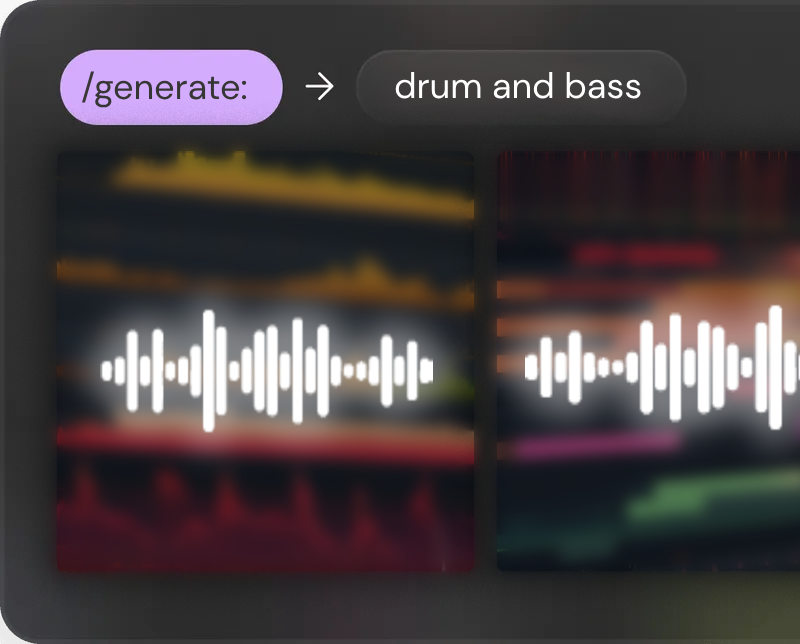
<style>
.page{position:relative;width:800px;height:644px}
.page>*{position:absolute;margin:0}
.t1{font:36px "DMSans-Regular";color:#363634}
.t2{font:36px "DMSans-Regular";color:#393738}
.t3{font:36px "DMSans-Regular";color:#ffffff}
</style>
<div class="page">
<p class="t1" style="left:82px;top:71px;width:165px;height:37px"><span class="t2">/</span>generate:</p>
<p class="t3" style="left:395px;top:72px;width:246px;height:27px">drum and bass</p>
</div>
